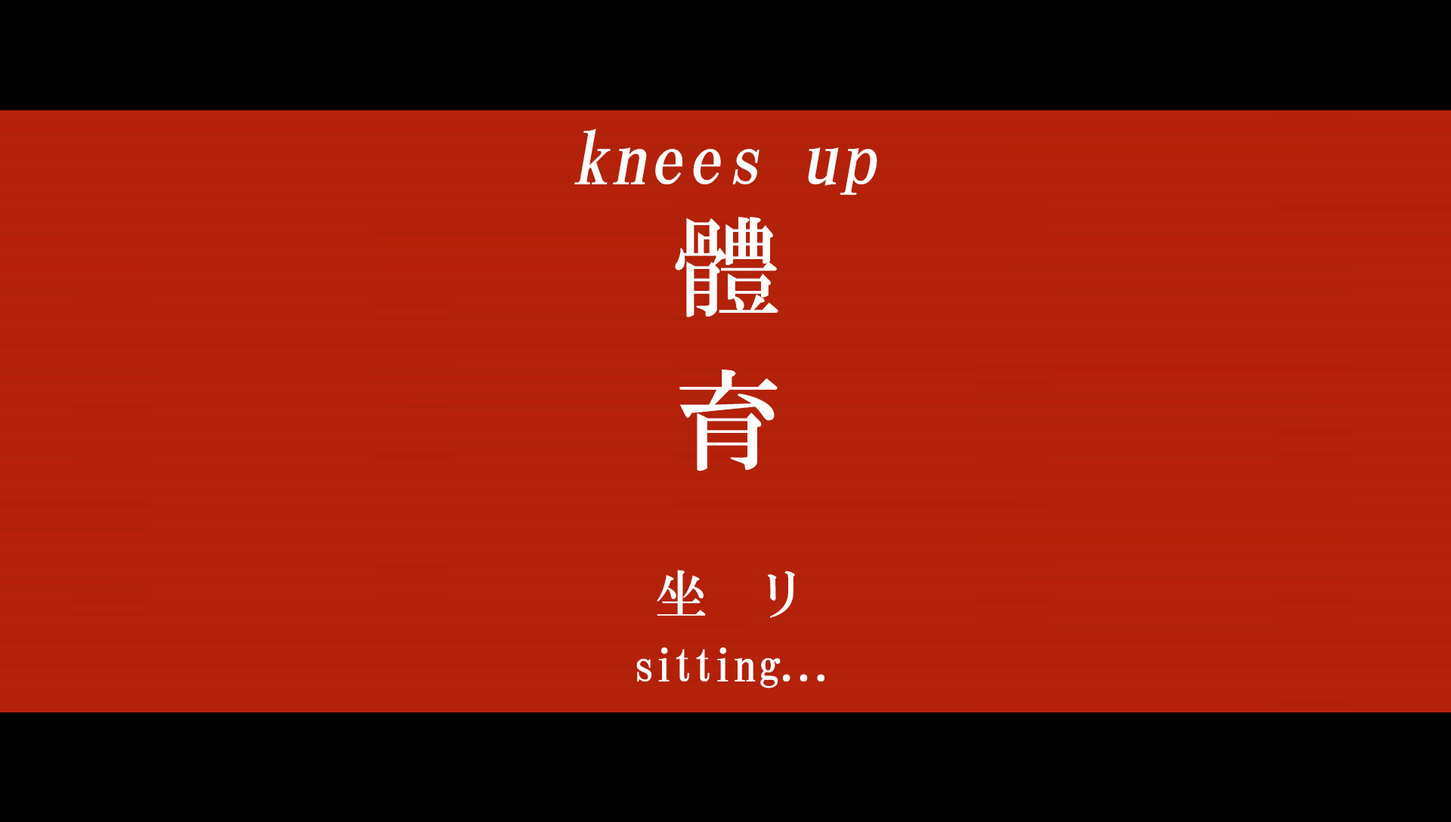
<style>
.page{position:relative;width:1451px;height:822px;background:#000000}
.page>*{position:absolute;margin:0}
.t1{font:72.5px "HGMinchoB";letter-spacing:0.025em;color:#fdfdfa;font-style:italic}
.t2{font:108.8px/153.4px "HGMinchoB";letter-spacing:0.27em;color:#fdfdfa}
.t3{font:53.6px "HGMinchoB";letter-spacing:0.89em;color:#fdfdfa}
.t4{font:46.3px "HGMinchoB";letter-spacing:0.025em;color:#fdfdfa}
</style>
<div class="page">
<p class="t1" style="left:574px;top:128px;width:303px;height:67px">knees up</p>
<p class="t2" style="left:675px;top:217px;width:103px;height:254px;text-align:center">體<br>育</p>
<p class="t3" style="left:657px;top:570px;width:138px;height:48px">坐リ</p>
<p class="t4" style="left:636px;top:647px;width:188px;height:41px">sitting...</p>
</div>
